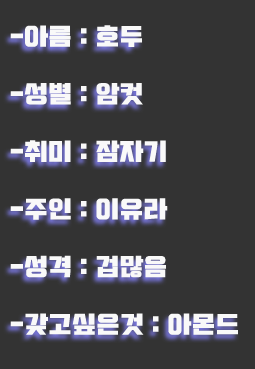
<style>
.page{position:relative;width:255px;height:369px;background:#333333}
.page>*{position:absolute;margin:0}
.t1{font:24px "Typo_SsangmunDong_B";color:#ffffff}
</style>
<div class="page">
<p class="t1" style="left:10px;top:25px;width:228px;height:310px;opacity:0.97">-아름 : 호두<br><br>-성별 : 암컷<br><br>-취미 : 잠자기<br><br>-주인 : 이유라<br><br>-성격 : 겁많음<br><br>-갖고싶은것 : 아몬드</p>
</div>
